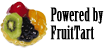
<style>
.page{position:relative;width:106px;height:48px;background:#ffffff}
.page>*{position:absolute;margin:0}
.t1{font:17.9px/17.9px "BirchStd";color:#000000;font-weight:bold}
</style>
<div class="page">
<p class="t1" style="left:50px;top:7px;width:54px;height:33px">Powered by<br>FruitTart</p>
</div>
